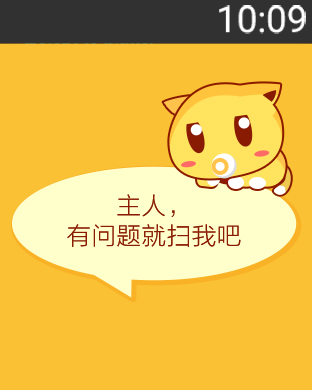
<style>
.page{position:relative;width:312px;height:390px;background:#f9c133}
.page>*{position:absolute;margin:0}
.t1{font:36.7px "Roboto-Regular";color:#ffffff}
.t2{font:24px/30px "STHeitiSC-Light";color:#891b02}
</style>
<div class="page">
<p class="t1" style="left:219px;top:5px;width:87px;height:29px">10:09</p>
<p class="t2" style="left:67px;top:194px;width:174px;height:53px;text-align:center">主人，<br>有问题就扫我吧</p>
</div>
